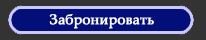
<style>
.page{position:relative;width:206px;height:40px;background:#333333}
.page>*{position:absolute;margin:0}
.t1{font:13.9px "PalatinoLinotype-Roman";color:#ffffff;font-weight:bold}
</style>
<div class="page">
<p class="t1" style="left:49px;top:14px;width:105px;height:15px">Забронировать</p>
</div>
